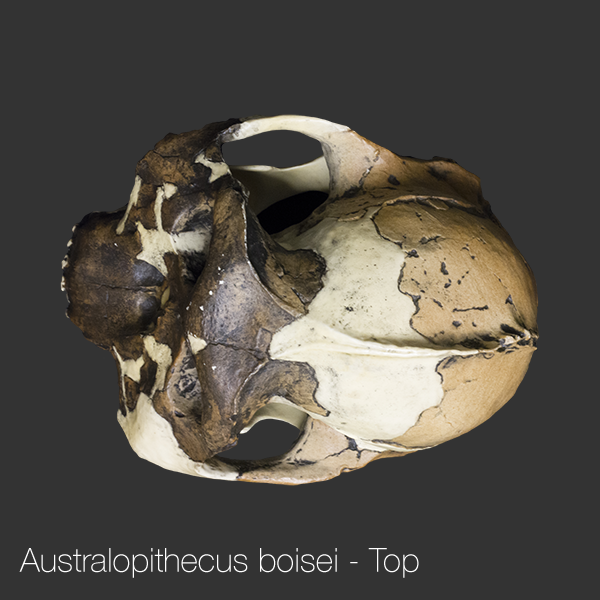
<style>
.page{position:relative;width:600px;height:600px;background:#333333}
.page>*{position:absolute;margin:0}
.t1{font:33.3px "HelveticaNeue-Thin";color:#ffffff}
</style>
<div class="page">
<p class="t1" style="left:19px;top:548px;width:400px;height:30px">Australopithecus boisei - Top</p>
</div>
